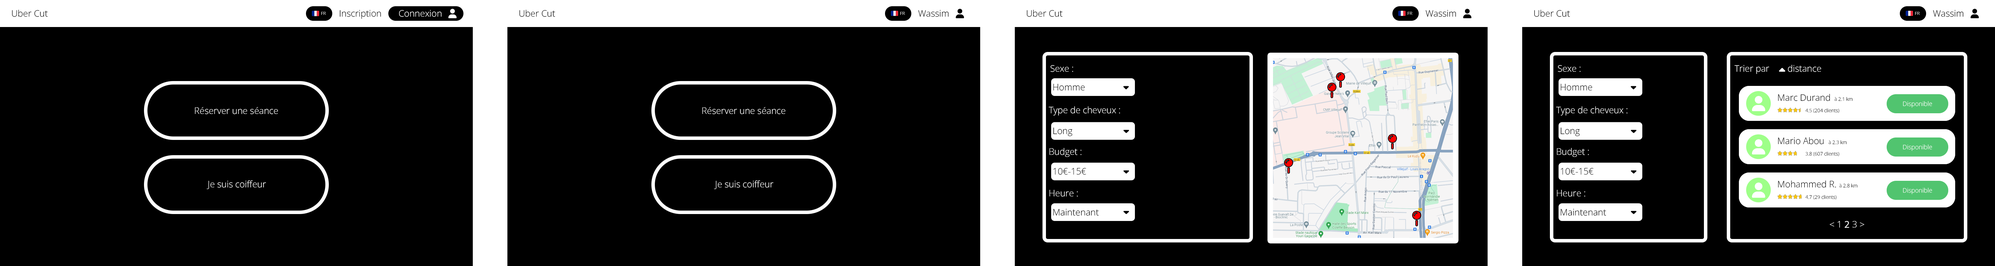
<style>
.page{position:relative;width:1995px;height:266px;background:#000000}
.page>*{position:absolute;margin:0}
.t1{font:9px "OpenSans-Light";color:#000000}
.t2{font:4.5px "OpenSans-Light";color:#ffffff}
.t3{font:9px "OpenSans-Light";color:#ffffff}
.t4{font:4.8px "OpenSans-Light";color:#000000}
.t5{font:6.2px "OpenSans-Light";color:#ffffff}
.t6{font:4.8px "OpenSans-Light"}
.t7{font:9px "OpenSans-Light";color:#ffffff;font-weight:bold}
</style>
<div class="page">
<p class="t1" style="left:12px;top:10px;width:36px;height:7px">Uber Cut</p>
<p class="t2" style="left:321px;top:12px;width:5px;height:3px">FR</p>
<p class="t1" style="left:340px;top:10px;width:41px;height:9px">Inscription</p>
<p class="t3" style="left:399px;top:10px;width:43px;height:7px">Connexion</p>
<p class="t1" style="left:519px;top:10px;width:36px;height:7px">Uber Cut</p>
<p class="t2" style="left:900px;top:12px;width:5px;height:3px">FR</p>
<p class="t1" style="left:918px;top:10px;width:31px;height:7px">Wassim</p>
<p class="t1" style="left:1027px;top:10px;width:36px;height:7px">Uber Cut</p>
<p class="t2" style="left:1408px;top:12px;width:5px;height:3px">FR</p>
<p class="t1" style="left:1426px;top:10px;width:30px;height:7px">Wassim</p>
<p class="t1" style="left:1534px;top:10px;width:36px;height:7px">Uber Cut</p>
<p class="t2" style="left:1915px;top:12px;width:5px;height:3px">FR</p>
<p class="t1" style="left:1933px;top:10px;width:31px;height:7px">Wassim</p>
<p class="t3" style="left:1735px;top:65px;width:35px;height:9px">Trier par</p>
<p class="t3" style="left:1788px;top:65px;width:33px;height:7px">distance</p>
<p class="t1" style="left:1053px;top:84px;width:32px;height:7px">Homme</p>
<p class="t1" style="left:1561px;top:84px;width:31px;height:7px">Homme</p>
<p class="t1" style="left:1778px;top:94px;width:52px;height:7px">Marc Durand</p>
<p class="t4" style="left:1835px;top:97px;width:18px;height:4px">à 2.1 km</p>
<p class="t5" style="left:1903px;top:101px;width:29px;height:7px">Disponible</p>
<p class="t3" style="left:195px;top:107px;width:83px;height:7px">Réserver une séance</p>
<p class="t3" style="left:702px;top:107px;width:83px;height:7px">Réserver une séance</p>
<p class="t4" style="left:1806px;top:108px;width:33px;height:5px">4.5 (204 clients)</p>
<p class="t1" style="left:1053px;top:127px;width:20px;height:9px">Long</p>
<p class="t1" style="left:1561px;top:127px;width:19px;height:9px">Long</p>
<p class="t1" style="left:1778px;top:137px;width:46px;height:7px">Mario Abou</p>
<p class="t4" style="left:1829px;top:140px;width:18px;height:4px">à 2.3 km</p>
<p class="t5" style="left:1903px;top:144px;width:29px;height:7px">Disponible</p>
<p class="t6" style="left:1806px;top:152px;width:33px;height:4px">3.8 (607 clients)</p>
<p class="t1" style="left:1053px;top:168px;width:33px;height:7px">10€-15€</p>
<p class="t1" style="left:1561px;top:168px;width:33px;height:7px">10€-15€</p>
<p class="t3" style="left:207px;top:180px;width:59px;height:9px">Je suis coiffeur</p>
<p class="t3" style="left:714px;top:180px;width:60px;height:9px">Je suis coiffeur</p>
<p class="t1" style="left:1778px;top:180px;width:58px;height:8px">Mohammed R.</p>
<p class="t4" style="left:1839px;top:183px;width:19px;height:5px">à 2.8 km</p>
<p class="t4" style="left:1806px;top:195px;width:31px;height:4px">4.7 (29 clients)</p>
<p class="t5" style="left:1903px;top:188px;width:29px;height:6px">Disponible</p>
<p class="t1" style="left:1053px;top:208px;width:46px;height:8px">Maintenant</p>
<p class="t1" style="left:1561px;top:208px;width:45px;height:8px">Maintenant</p>
<p class="t3" style="left:1830px;top:221px;width:34px;height:7px">&lt; 1 <span class="t7">2</span> 3 &gt;</p>
</div>
